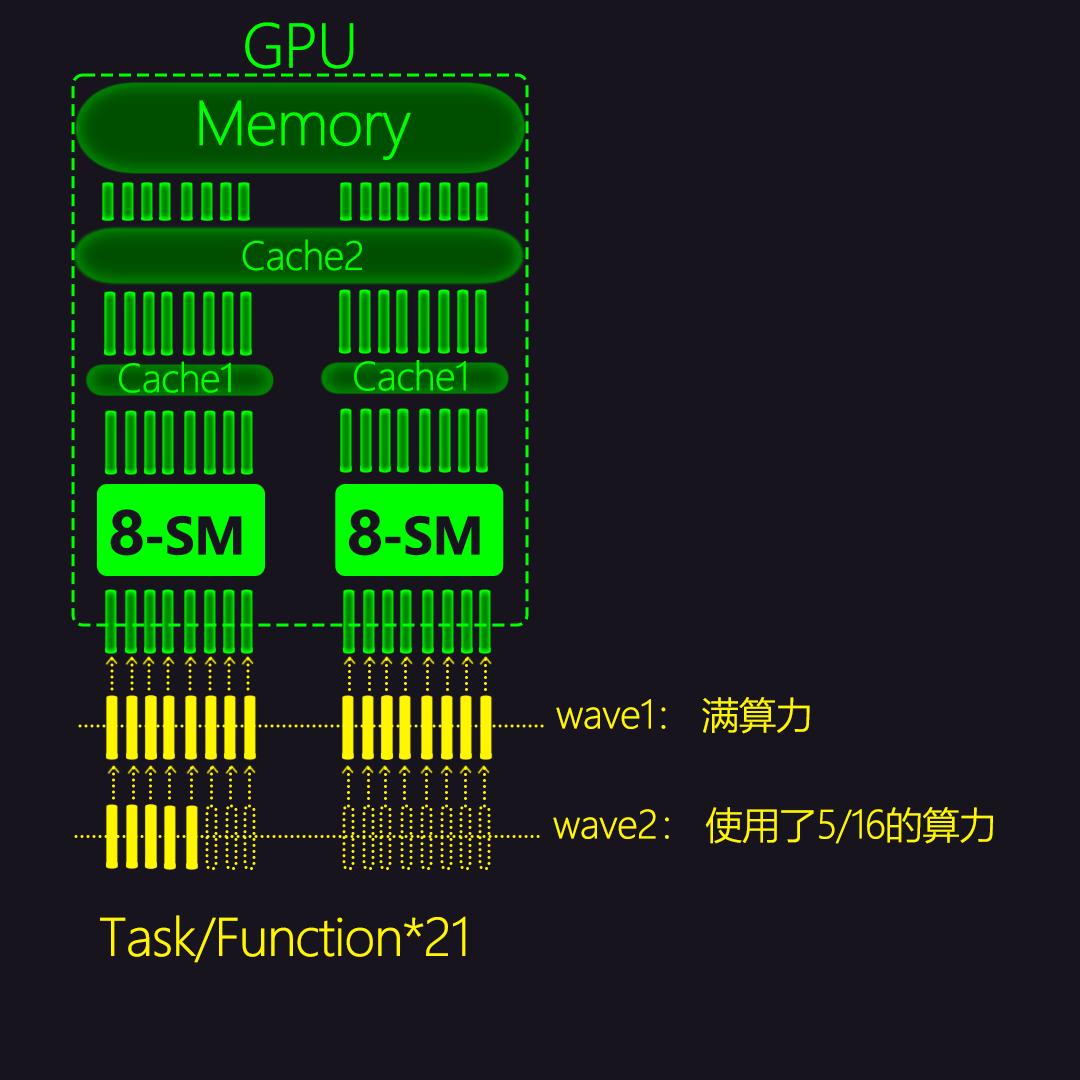
<style>
.page{position:relative;width:1080px;height:1080px;background:#18141e}
.page>*{position:absolute;margin:0}
.t1{font:58.3px "MicrosoftYaHeiLight";letter-spacing:-0.04em;color:#00ff00;font-weight:bold}
.t2{font:37.5px "MicrosoftYaHeiLight";letter-spacing:-0.04em;color:#00ff00;font-weight:bold}
.t3{font:50px "MicrosoftYaHei-Bold";letter-spacing:-0.04em;color:#18141e;font-weight:bold}
.t4{font:58.3px "MicrosoftYaHei-Bold";letter-spacing:-0.04em;color:#18141e;font-weight:bold}
.t5{font:37.5px "MicrosoftYaHeiLight";letter-spacing:-0.04em;color:#fff600;font-weight:bold}
.t6{font:50px "MicrosoftYaHeiLight";letter-spacing:-0.04em;color:#fff600;font-weight:bold}
</style>
<div class="page">
<p class="t1" style="left:245px;top:22px;width:109px;height:47px">GPU</p>
<p class="t1" style="left:199px;top:100px;width:212px;height:60px">Memory</p>
<p class="t2" style="left:242px;top:239px;width:120px;height:32px">Cache2</p>
<p class="t2" style="left:119px;top:361px;width:112px;height:32px">Cache1</p>
<p class="t2" style="left:354px;top:360px;width:112px;height:31px">Cache1</p>
<p class="t3" style="left:110px;top:509px;width:132px;height:47px"><span class="t4">8</span>-SM</p>
<p class="t3" style="left:348px;top:509px;width:132px;height:47px"><span class="t4">8</span>-SM</p>
<p class="t5" style="left:556px;top:697px;width:254px;height:37px">wave1： 满算力</p>
<p class="t5" style="left:553px;top:807px;width:440px;height:37px">wave2： 使用了5/16的算力</p>
<p class="t6" style="left:100px;top:915px;width:366px;height:48px">Task/Function*21</p>
</div>
